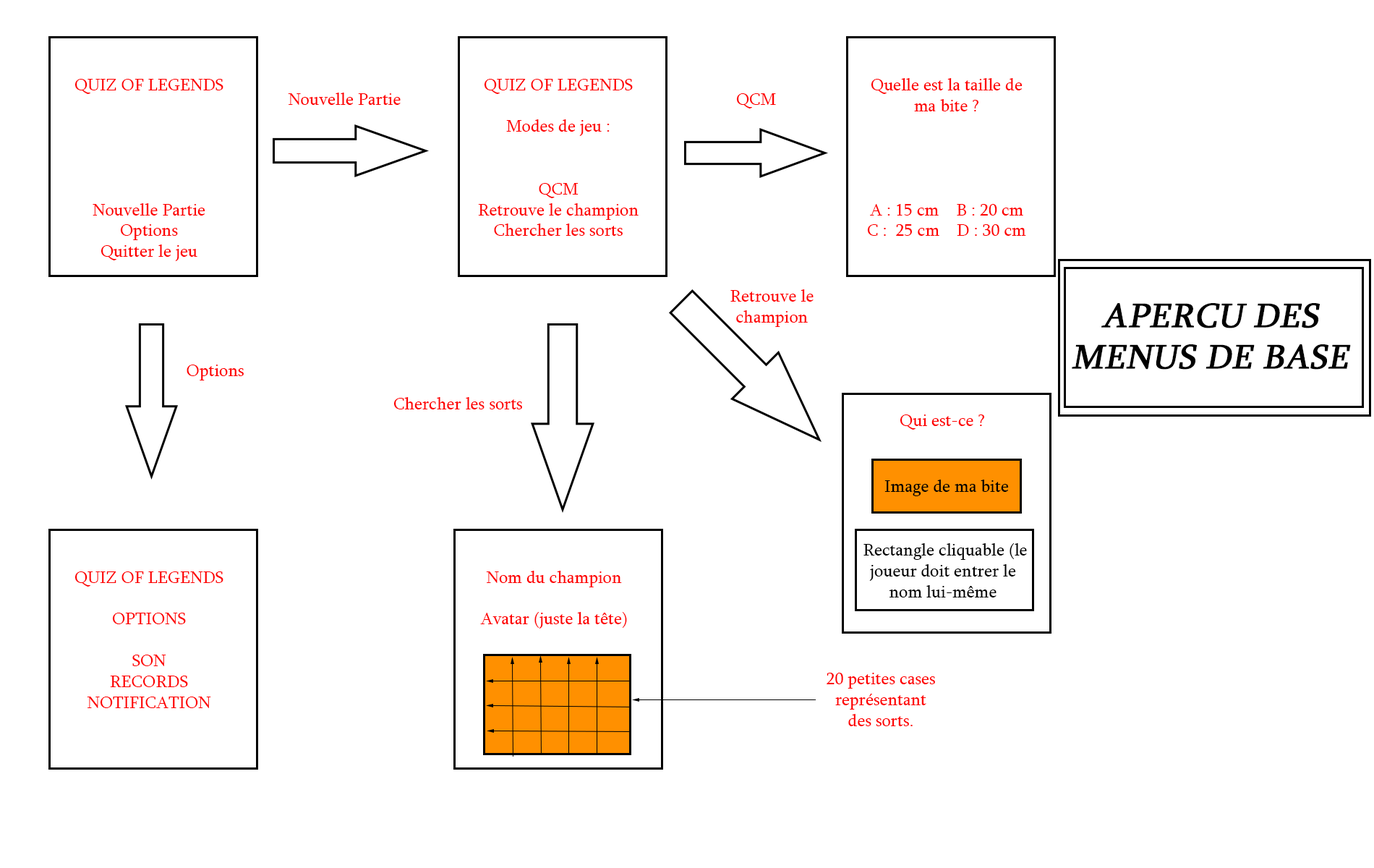
<style>
.page{position:relative;width:1374px;height:868px;background:#ffffff}
.page>*{position:absolute;margin:0}
.t1{font:17.4px "Sylfaen";color:#fe0000}
.t2{font:17.4px "Sylfaen";color:#ff0000}
.t3{font:34.7px "Sylfaen";color:#000000;font-weight:bold;font-style:italic}
.t4{font:17.4px "Sylfaen";color:#000000}
</style>
<div class="page">
<p class="t1" style="left:74px;top:79px;width:149px;height:182px;text-align:center">QUIZ OF LEGENDS<br><br><br><br><br><br>Nouvelle Partie<br>Options<br>Quitter le jeu</p>
<p class="t1" style="left:478px;top:79px;width:161px;height:157px;text-align:center">QUIZ OF LEGENDS<br><br>Modes de jeu :<br><br><br>QCM<br>Retrouve le champion<br>Chercher les sorts</p>
<p class="t1" style="left:867px;top:78px;width:159px;height:158px;text-align:center">Quelle est la taille de ma bite ?<br><br><br><br><br>A : 15 cm    B : 20 cm<br>C :  25 cm    D : 30 cm</p>
<p class="t1" style="left:288px;top:93px;width:113px;height:12px">Nouvelle Partie</p>
<p class="t1" style="left:736px;top:93px;width:40px;height:15px">QCM</p>
<p class="t2" style="left:730px;top:289px;width:84px;height:38px;text-align:center">Retrouve le champion</p>
<p class="t3" style="left:1072px;top:303px;width:279px;height:67px;text-align:center">APERCU DES MENUS DE BASE</p>
<p class="t1" style="left:187px;top:364px;width:57px;height:16px">Options</p>
<p class="t1" style="left:393px;top:397px;width:129px;height:12px">Chercher les sorts</p>
<p class="t1" style="left:900px;top:414px;width:85px;height:16px">Qui est-ce ?</p>
<p class="t4" style="left:884px;top:479px;width:125px;height:17px">Image de ma bite</p>
<p class="t4" style="left:863px;top:543px;width:164px;height:54px;text-align:center">Rectangle cliquable (le joueur doit entrer le nom lui-même</p>
<p class="t1" style="left:74px;top:571px;width:149px;height:137px;text-align:center">QUIZ OF LEGENDS<br><br>OPTIONS<br><br>SON<br>RECORDS<br>NOTIFICATION</p>
<p class="t1" style="left:480px;top:571px;width:147px;height:57px;text-align:center">Nom du champion<br><br>Avatar (juste la tête)</p>
<p class="t1" style="left:827px;top:673px;width:108px;height:53px;text-align:center">20 petites cases <br>représentant <br>des sorts.</p>
</div>
